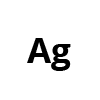
<style>
.page{position:relative;width:100px;height:100px;background:#ffffff}
.page>*{position:absolute;margin:0}
.t1{font:35px "OpenSans-Bold";color:#000000}
</style>
<div class="page">
<p class="t1" style="left:27px;top:38px;width:44px;height:33px">Ag</p>
</div>
